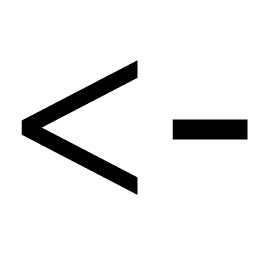
<style>
.page{position:relative;width:256px;height:256px;background:#ffffff}
.page>*{position:absolute;margin:0}
.t1{font:255.7px "Georgia";color:#000000}
</style>
<div class="page">
<p class="t1" style="left:21px;top:60px;width:227px;height:135px">&lt;-</p>
</div>
